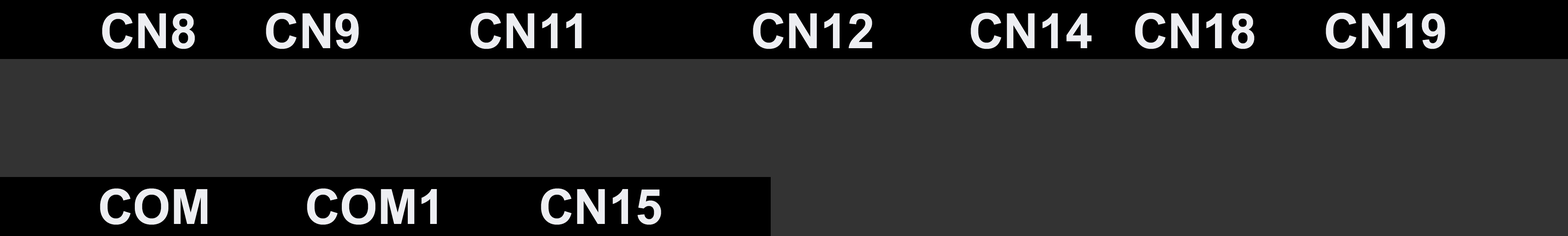
<style>
.page{position:relative;width:1568px;height:236px;background:#333333}
.page>*{position:absolute;margin:0}
.t1{font:48.4px "Arial-BoldMT";color:#edeef2}
</style>
<div class="page">
<p class="t1" style="left:102px;top:12px;width:1343px;height:37px">CN8     CN9        CN11            CN12       CN14   CN18     CN19</p>
<p class="t1" style="left:100px;top:188px;width:561px;height:36px">COM       COM1       CN15</p>
</div>
